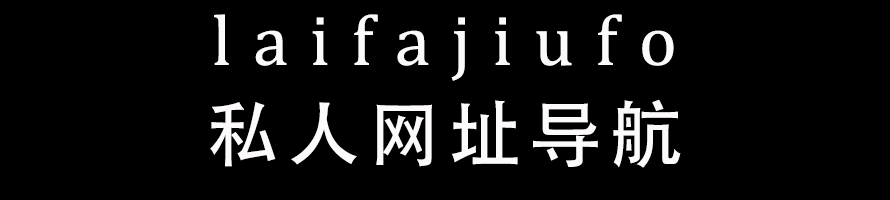
<style>
.page{position:relative;width:890px;height:200px;background:#000000}
.page>*{position:absolute;margin:0}
.t1{font:72px "CambriaMath";letter-spacing:0.3em;color:#fcfafa}
.t2{font:72px "AdobeHeitiStd-Regular";letter-spacing:0.12em;color:#fcfafa}
</style>
<div class="page">
<p class="t1" style="left:214px;top:14px;width:460px;height:67px">laifajiufo</p>
<p class="t2" style="left:210px;top:99px;width:471px;height:69px">私人网址导航</p>
</div>
